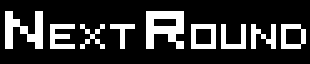
<style>
.page{position:relative;width:310px;height:64px;background:#000000}
.page>*{position:absolute;margin:0}
.t1{font:40px "5x5-Pixel";color:#ffffff}
.t2{font:60px "5x5-Pixel";color:#ffffff}
</style>
<div class="page">
<p class="t1" style="left:5px;top:11px;width:301px;height:38px"><span class="t2">n</span>EXT <span class="t2">r</span>OUND</p>
</div>
